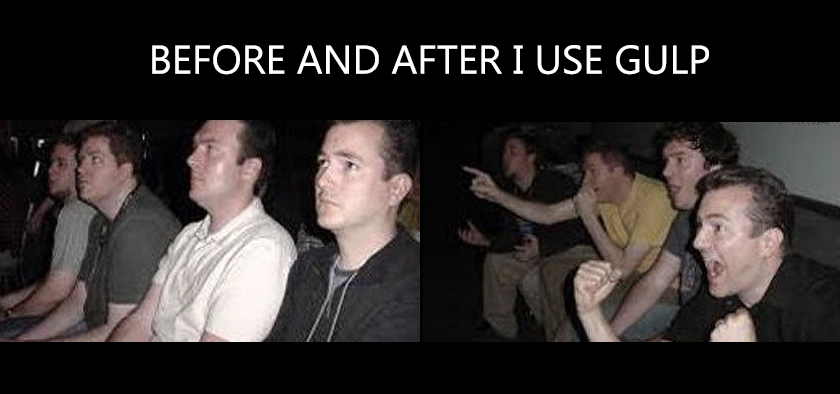
<style>
.page{position:relative;width:840px;height:394px;background:#000000}
.page>*{position:absolute;margin:0}
.t1{font:40px "MicrosoftTaiLe";color:#ffffff}
</style>
<div class="page">
<p class="t1" style="left:152px;top:45px;width:557px;height:30px">BEFORE AND AFTER I USE GULP</p>
</div>
